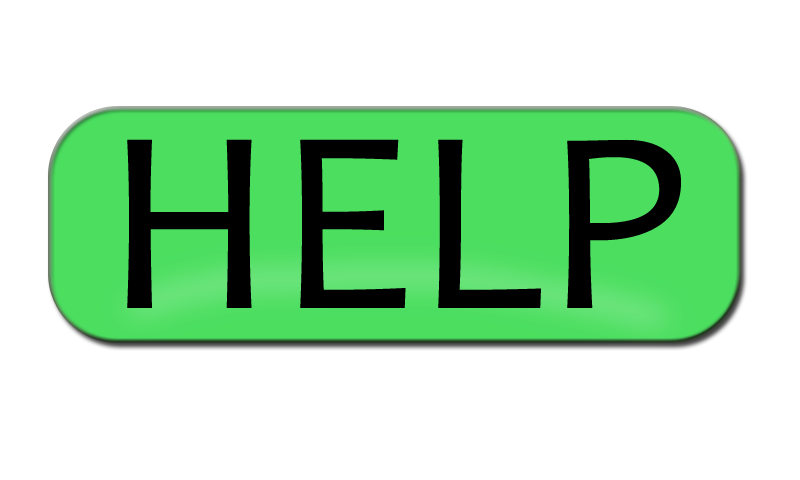
<style>
.page{position:relative;width:800px;height:480px;background:#ffffff}
.page>*{position:absolute;margin:0}
.t1{font:265px "Candara";color:#000000}
</style>
<div class="page">
<p class="t1" style="left:127px;top:139px;width:554px;height:169px">HELP</p>
</div>
